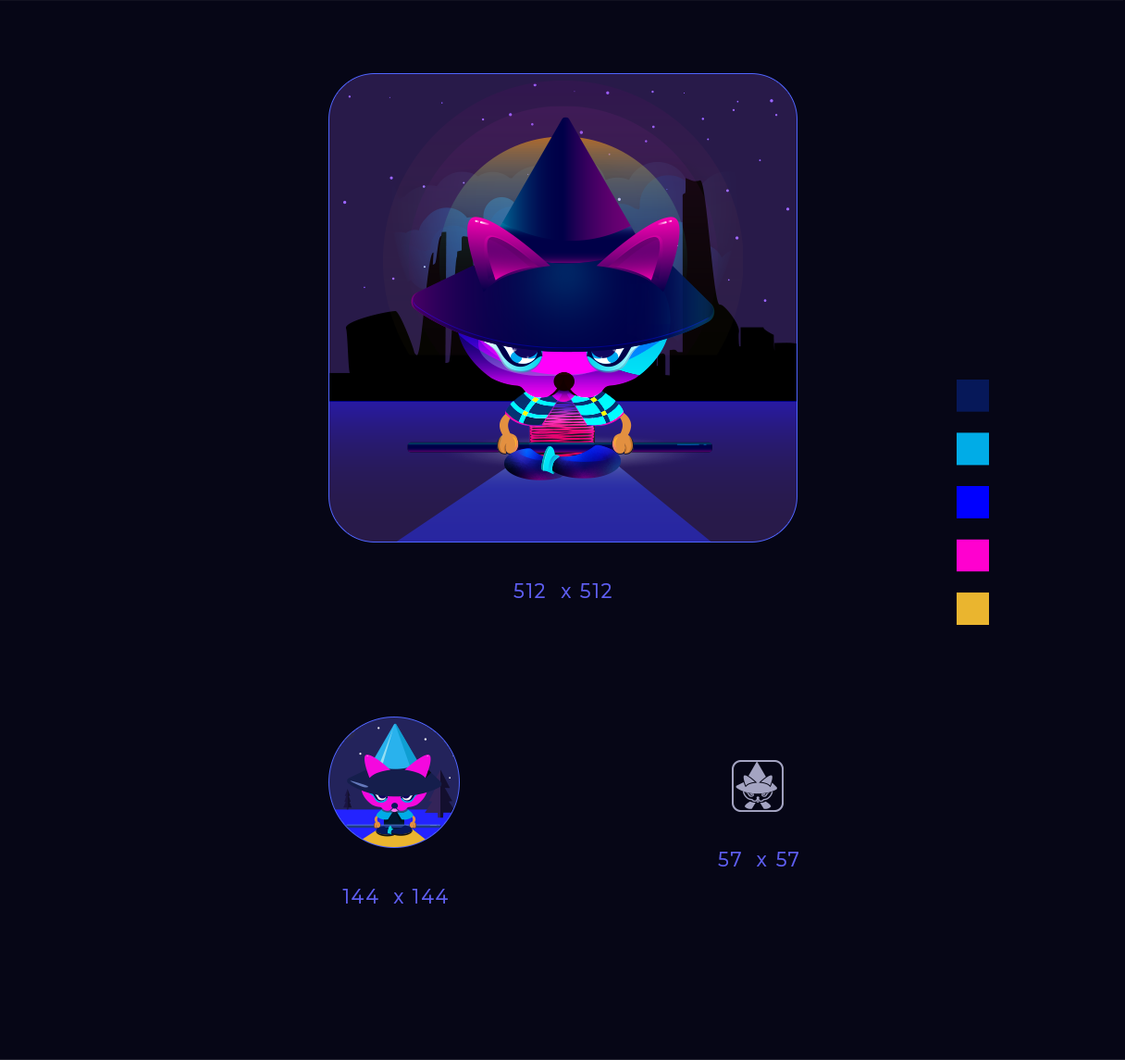
<style>
.page{position:relative;width:1125px;height:1060px;background:#060616}
.page>*{position:absolute;margin:0}
.t1{font:20.3px "Montserrat-Regular";letter-spacing:0.1em;color:#5e5ef1;scale:0.93 1}
</style>
<div class="page">
<p class="t1" style="left:514px;top:583px;width:98px;height:15px">512  x 512</p>
<p class="t1" style="left:718px;top:851px;width:81px;height:15px">57  x 57</p>
<p class="t1" style="left:342px;top:888px;width:106px;height:15px">144  x 144</p>
</div>
